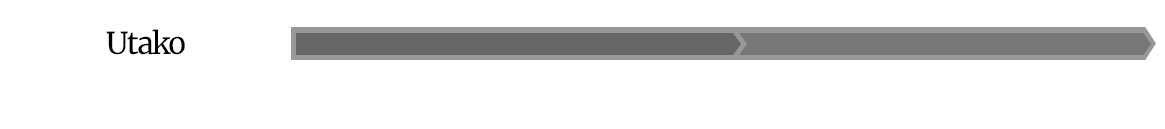
<style>
.page{position:relative;width:1165px;height:129px;background:#ffffff}
.page>*{position:absolute;margin:0}
.t1{font:30px "Merriweather-Regular";letter-spacing:-0.06em;color:#000000}
</style>
<div class="page">
<p class="t1" style="left:106px;top:29px;width:79px;height:26px">Utako</p>
</div>
